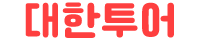
<style>
.page{position:relative;width:200px;height:40px;background:#ffffff}
.page>*{position:absolute;margin:0}
.t1{font:40.6px "Cafe24Ssurround";color:#fe3f3f}
</style>
<div class="page">
<p class="t1" style="left:25px;top:2px;width:149px;height:36px">대한투어</p>
</div>
